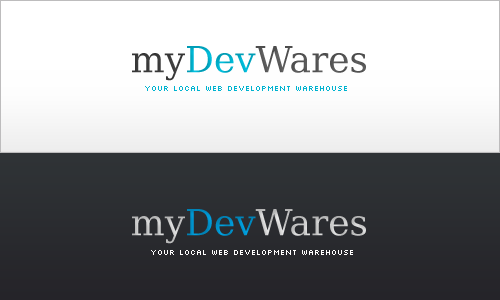
<style>
.page{position:relative;width:500px;height:300px;background:#ffffff}
.page>*{position:absolute;margin:0}
.t1{font:36px "BitstreamVeraSerif-Roman";color:#6c6c6c}
.t2{font:36px "BitstreamVeraSerif-Roman";color:#4a4a4a}
.t3{font:36px "BitstreamVeraSerif-Roman";color:#00dcff}
.t4{font:8px "Silkscreen";color:#00b3d0}
.t5{font:36px "BitstreamVeraSerif-Roman"}
.t6{font:8px "Silkscreen";color:#fffefe}
</style>
<div class="page">
<p class="t1" style="left:132px;top:46px;width:234px;height:35px"><span class="t2">my</span><span class="t3">Dev</span>Wares</p>
<p class="t4" style="left:145px;top:86px;width:202px;height:5px">your local web development warehouse</p>
<p class="t5" style="left:132px;top:209px;width:234px;height:35px">myDevWares</p>
<p class="t6" style="left:151px;top:250px;width:202px;height:5px">your local web development warehouse</p>
</div>
